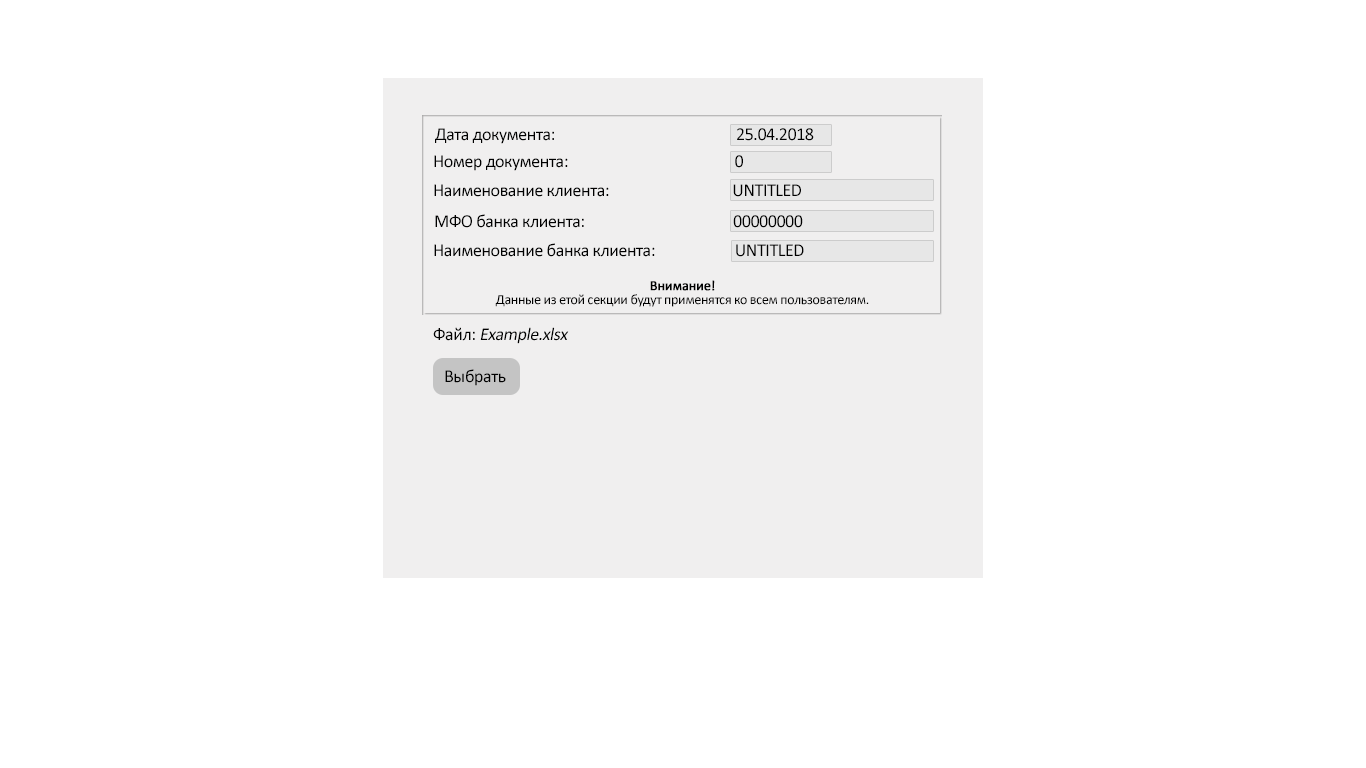
<style>
.page{position:relative;width:1366px;height:768px;background:#ffffff}
.page>*{position:absolute;margin:0}
.t1{font:18px "Calibri";letter-spacing:-0.025em;color:#000000}
.t2{font:14px/14px "Calibri";letter-spacing:-0.025em;color:#000000}
.t3{font:14px/14px "Calibri";letter-spacing:-0.025em;color:#000000;font-weight:bold}
.t4{font:18px "Calibri";letter-spacing:-0.025em;color:#000000;font-style:italic}
</style>
<div class="page">
<p class="t1" style="left:435px;top:128px;width:379px;height:16px">Дата документа:                                                  25.04.2018</p>
<p class="t1" style="left:434px;top:155px;width:309px;height:16px">Номер документа:                                              0</p>
<p class="t1" style="left:434px;top:184px;width:367px;height:13px">Наименование клиента:                                  UNTITLED</p>
<p class="t1" style="left:435px;top:214px;width:368px;height:14px">МФО банка клиента:                                         00000000</p>
<p class="t1" style="left:434px;top:243px;width:370px;height:14px">Наименование банка клиента:                      UNTITLED</p>
<p class="t2" style="left:495px;top:280px;width:374px;height:27px;text-align:center"><span class="t3">Внимание!<br></span>Данные из етой секции будут применятся ко всем пользователям.</p>
<p class="t4" style="left:433px;top:327px;width:136px;height:17px"><span class="t1">Файл: </span>Example.xlsx</p>
<p class="t1" style="left:445px;top:369px;width:61px;height:17px">Выбрать</p>
</div>
